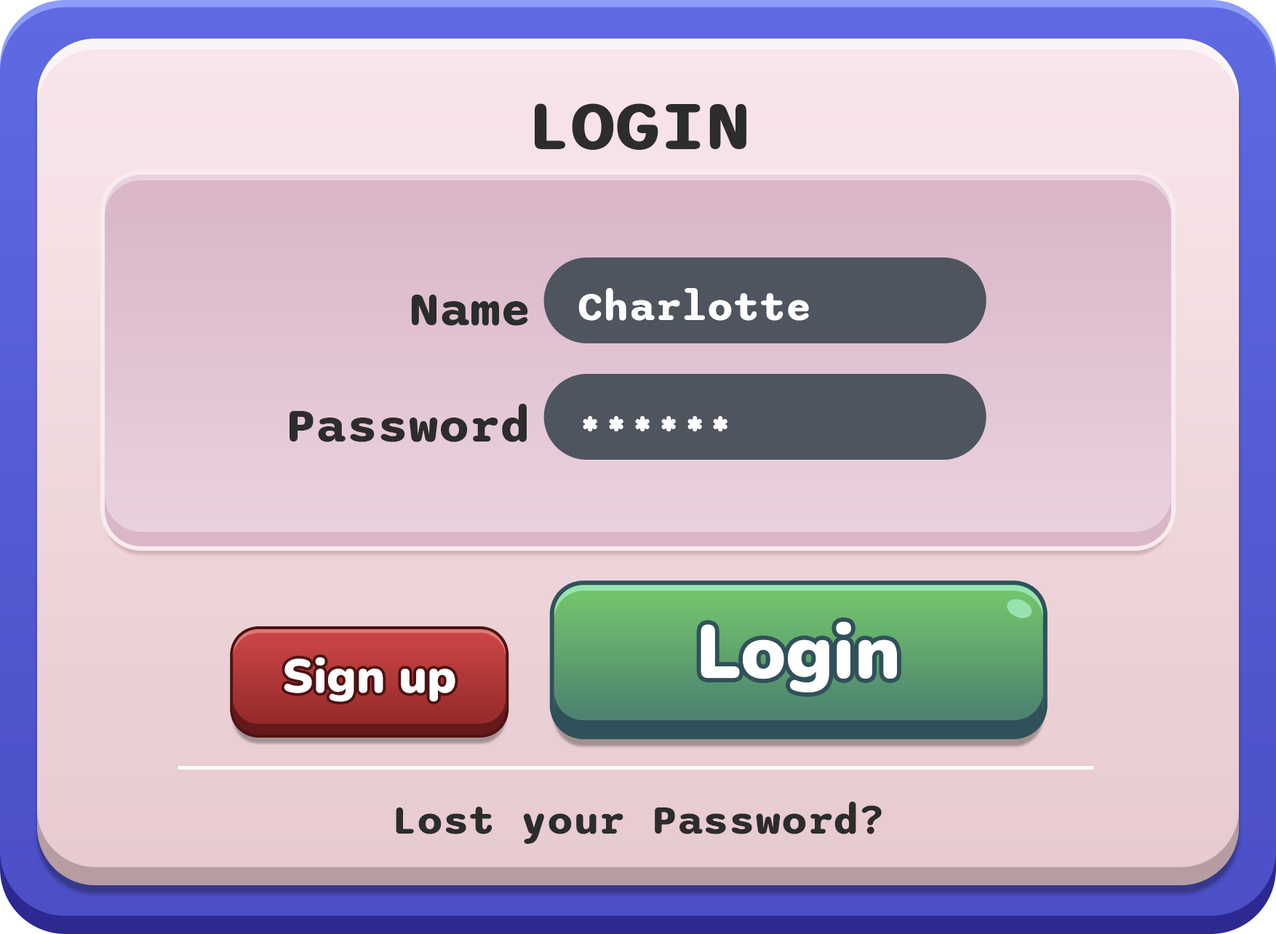
<style>
.page{position:relative;width:1276px;height:934px}
.page>*{position:absolute;margin:0}
.t1{font:72.8px "Sono-Bold";color:#2c2c2c}
.t2{font:42.1px "Sono-Bold";color:#ffffff}
.t3{font:49.5px "Sono-Bold";color:#2c2c2c}
.t4{font:75.7px "Nunito-Black";color:#ffffff}
.t5{font:47.3px "Nunito-Black";color:#ffffff}
.t6{font:42.1px "Sono-Bold";color:#2c2c2c}
</style>
<div class="page">
<p class="t1" style="left:534px;top:103px;width:213px;height:47px">LOGIN</p>
<p class="t2" style="left:578px;top:288px;width:231px;height:33px">Charlotte</p>
<p class="t3" style="left:411px;top:295px;width:117px;height:31px">Name</p>
<p class="t3" style="left:290px;top:404px;width:237px;height:38px">Password</p>
<p class="t2" style="left:583px;top:416px;width:145px;height:15px">******</p>
<p class="t4" style="left:701px;top:621px;width:196px;height:72px">Login</p>
<p class="t5" style="left:284px;top:657px;width:172px;height:45px">Sign up</p>
<p class="t6" style="left:396px;top:802px;width:486px;height:42px">Lost your Password?</p>
</div>
